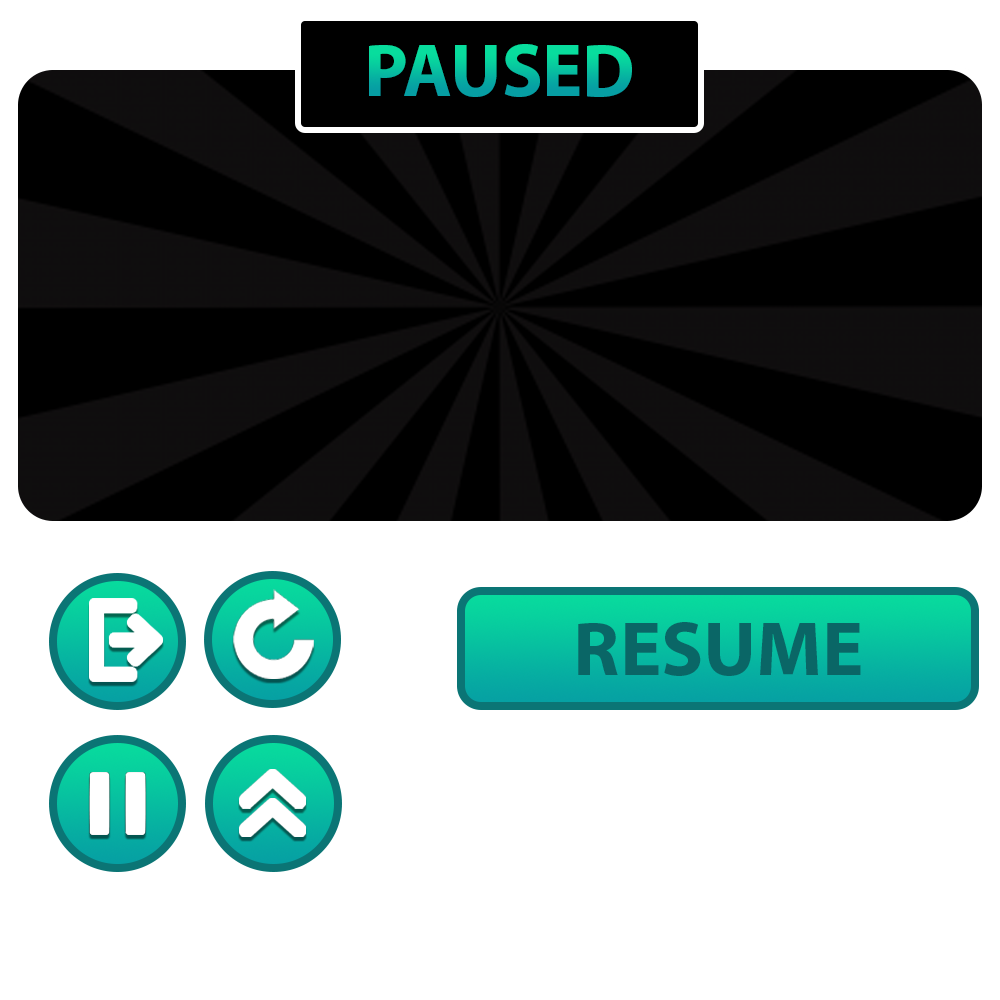
<style>
.page{position:relative;width:1000px;height:1000px;background:#ffffff}
.page>*{position:absolute;margin:0}
.t1{font:75.4px "MyriadPro-Bold"}
.t2{font:77.8px "MyriadPro-Bold";color:#0a6666}
</style>
<div class="page">
<p class="t1" style="left:369px;top:44px;width:263px;height:53px">PAUSED</p>
<p class="t2" style="left:578px;top:622px;width:283px;height:54px">RESUME</p>
</div>
